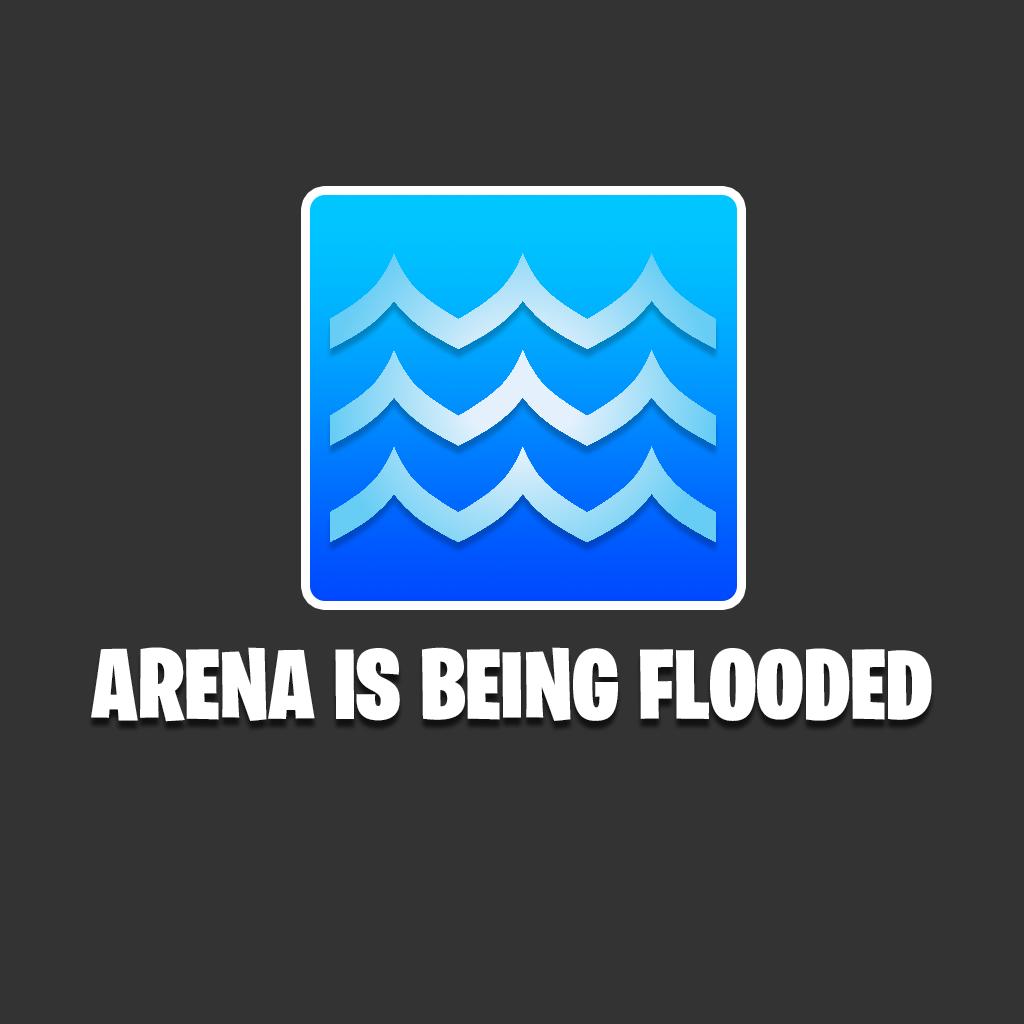
<style>
.page{position:relative;width:1024px;height:1024px;background:#333333}
.page>*{position:absolute;margin:0}
.t1{font:100px "BurbankBigCondensed-Black";color:#ffffff}
</style>
<div class="page">
<p class="t1" style="left:91px;top:647px;width:841px;height:75px">ARENA IS BEING FLOODED</p>
</div>
